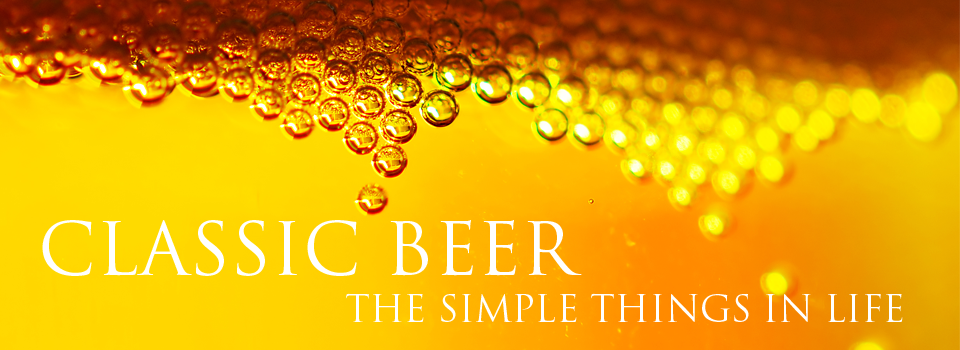
<style>
.page{position:relative;width:960px;height:350px}
.page>*{position:absolute;margin:0}
.t1{font:72px "TrajanPro-Regular";color:#ffffff;text-transform:uppercase}
.t2{font:36px "TrajanPro-Regular";color:#ffffff;text-transform:uppercase}
</style>
<div class="page">
<p class="t1" style="left:42px;top:220px;width:540px;height:56px">CLASSIC BEER</p>
<p class="t2" style="left:346px;top:293px;width:557px;height:29px">THE SIMPLE THINGS IN LIFE</p>
</div>
